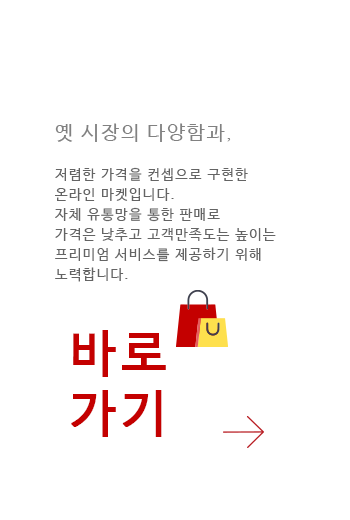
<style>
.page{position:relative;width:350px;height:520px;background:#ffffff}
.page>*{position:absolute;margin:0}
.t1{font:14px/20px "NanumBarunGothic";letter-spacing:0.1em;color:#646464}
.t2{font:20px "NanumBarunGothic";letter-spacing:0.1em;color:#818181}
.t3{font:16px "NanumBarunGothic";letter-spacing:0.1em;color:#818181}
.t4{font:14px/40px "NanumBarunGothic";letter-spacing:0.1em;color:#646464}
.t5{font:50px "NanumBarunGothic";letter-spacing:0.1em;color:#c40000;font-weight:bold}
</style>
<div class="page">
<p class="t1" style="left:55px;top:123px;width:221px;height:159px"><span class="t2">옛 시장의 다양함과</span><span class="t3">, <br></span><span class="t4">저렴한 가격을 컨셉으로 구현한<br></span>온라인 마켓입니다.<br>자체 유통망을 통한 판매로<br>가격은 낮추고 고객만족도는 높이는<br>프리미엄 서비스를 제공하기 위해<br>노력합니다.</p>
<p class="t5" style="left:71px;top:330px;width:95px;height:107px">바로<br>가기</p>
</div>
